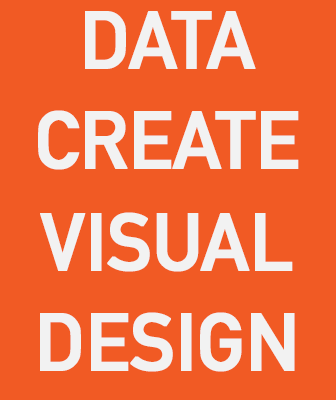
<style>
.page{position:relative;width:336px;height:400px;background:#f15a24}
.page>*{position:absolute;margin:0}
.t1{font:80px "DINAlternate-Bold";letter-spacing:-0.025em;color:#f2f2f2;text-transform:uppercase;font-weight:bold}
</style>
<div class="page">
<p class="t1" style="left:85px;top:11px;width:171px;height:58px">Data</p>
<p class="t1" style="left:38px;top:110px;width:261px;height:60px">Create</p>
<p class="t1" style="left:40px;top:212px;width:253px;height:60px">Visual</p>
<p class="t1" style="left:40px;top:312px;width:255px;height:60px">Design</p>
</div>
